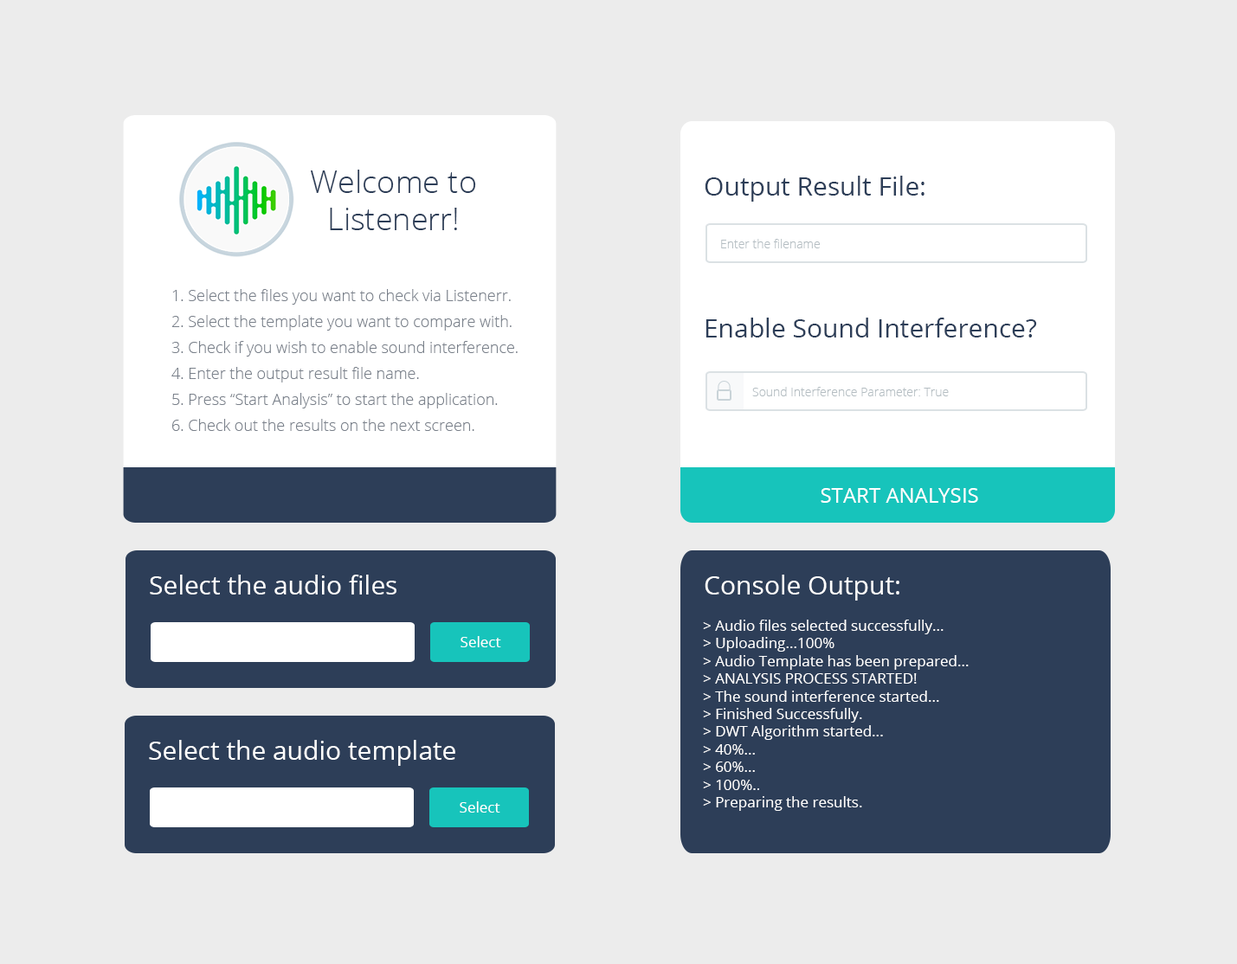
<style>
.page{position:relative;width:1237px;height:964px;background:#ececec}
.page>*{position:absolute;margin:0}
.t1{font:31.2px "OpenSans-Light";color:#2d3e58}
.t2{font:26px "OpenSans";color:#2d3e58}
.t3{font:12.1px "OpenSans-Light";color:#b4bdc2}
.t4{font:15.6px/26px "OpenSans-Light";color:#79808a}
.t5{font:20.8px "OpenSans";color:#ffffff}
.t6{font:26px "OpenSans";color:#ffffff}
.t7{font:14.7px "OpenSans";color:#ffffff}
</style>
<div class="page">
<p class="t1" style="left:311px;top:170px;width:165px;height:60px;text-align:center">Welcome to<br>Listenerr!</p>
<p class="t2" style="left:705px;top:176px;width:219px;height:26px">Output Result File:</p>
<p class="t3" style="left:721px;top:239px;width:99px;height:9px">Enter the filename</p>
<p class="t4" style="left:171px;top:289px;width:347px;height:142px">1. Select the files you want to check via Listenerr.<br>2. Select the template you want to compare with.<br>3. Check if you wish to enable sound interference.<br>4. Enter the output result file name.<br>5. Press “Start Analysis” to start the application.<br>6. Check out the results on the next screen.</p>
<p class="t2" style="left:705px;top:318px;width:332px;height:20px">Enable Sound Interference?</p>
<p class="t3" style="left:752px;top:387px;width:197px;height:9px">Sound Interference Parameter: True</p>
<p class="t5" style="left:820px;top:488px;width:158px;height:15px">START ANALYSIS</p>
<p class="t6" style="left:150px;top:575px;width:246px;height:20px">Select the audio files</p>
<p class="t6" style="left:705px;top:575px;width:194px;height:26px">Console Output:</p>
<p class="t7" style="left:703px;top:620px;width:265px;height:191px">&gt; Audio files selected successfully...<br>&gt; Uploading...100%<br>&gt; Audio Template has been prepared...<br>&gt; ANALYSIS PROCESS STARTED!<br>&gt; The sound interference started...<br>&gt; Finished Successfully.<br>&gt; DWT Algorithm started...<br>&gt; 40%...<br>&gt; 60%...<br>&gt; 100%..<br>&gt; Preparing the results.</p>
<p class="t7" style="left:460px;top:636px;width:41px;height:11px">Select</p>
<p class="t6" style="left:149px;top:740px;width:306px;height:26px">Select the audio template</p>
<p class="t7" style="left:460px;top:801px;width:40px;height:12px">Select</p>
</div>
